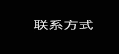
<style>
.page{position:relative;width:119px;height:54px;background:#020202}
.page>*{position:absolute;margin:0}
.t1{font:11px "HiraginoSansGB-W3";color:#ffffff;scale:1.37 1}
</style>
<div class="page">
<p class="t1" style="left:34px;top:20px;width:59px;height:10px">联系方式</p>
</div>
